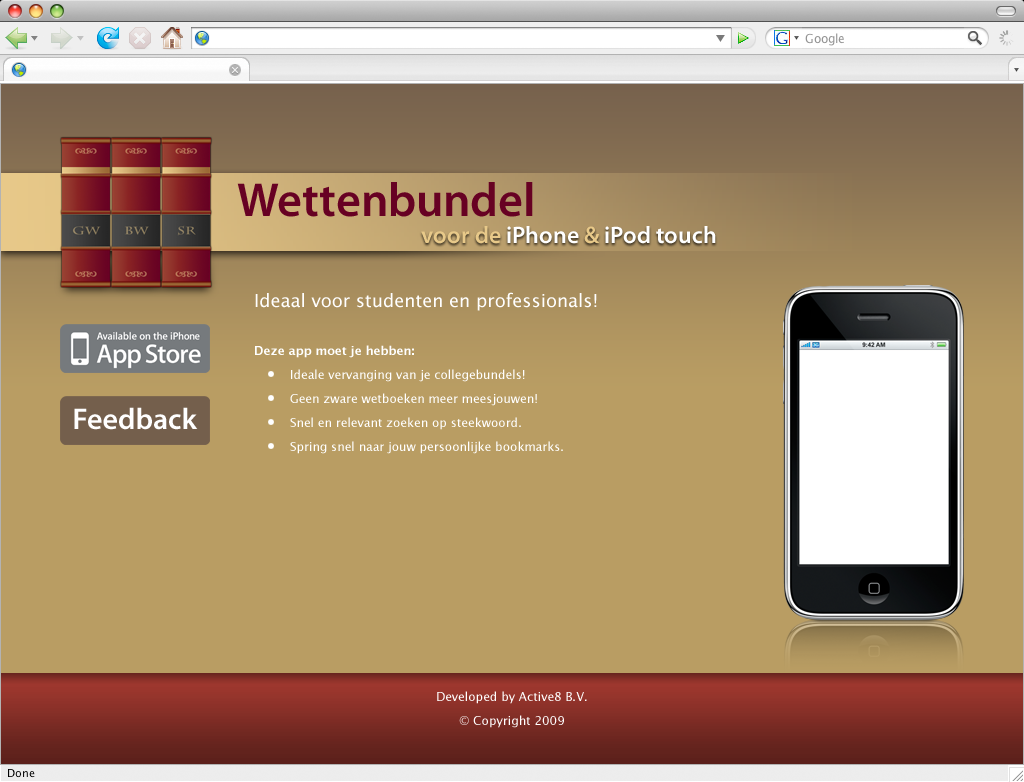
<style>
.page{position:relative;width:1024px;height:782px;background:#b99d63}
.page>*{position:absolute;margin:0}
.t1{font:48px "MyriadPro-Semibold";color:#670123}
.t2{font:24px "MyriadPro-Semibold";color:#ffffff}
.t3{font:24px "CharlemagneStd-Bold";color:#670123}
.t4{font:24px "MyriadPro-Semibold";color:#e8c989}
.t5{font:12px/24px "LucidaGrande";color:#ffffff}
.t6{font:18px/24px "LucidaGrande";color:#ffffff}
.t7{font:12px/24px "LucidaGrande-Bold";color:#ffffff}
.t8{font:30px "MyriadPro-Semibold";color:#ffffff}
</style>
<div class="page">
<p class="t1" style="left:237px;top:182px;width:296px;height:35px">Wettenbundel</p>
<p class="t2" style="left:421px;top:226px;width:295px;height:18px"><span class="t3"> <br></span><span class="t4">voor de </span>iPhone<span class="t4"> &amp; </span>iPod touch</p>
<p class="t5" style="left:255px;top:292px;width:342px;height:162px"><span class="t6">Ideaal voor studenten en professionals!<br><br></span><span class="t7">Deze app moet je hebben:<br></span> Ideale vervanging van je collegebundels!<br> Geen zware wetboeken meer meesjouwen!<br> Snel en relevant zoeken op steekwoord.<br> Spring snel naar jouw persoonlijke bookmarks.</p>
<p class="t8" style="left:74px;top:407px;width:124px;height:23px">Feedback</p>
<p class="t5" style="left:437px;top:691px;width:150px;height:37px;text-align:center">Developed by Active8 B.V.<br>© Copyright 2009</p>
</div>
